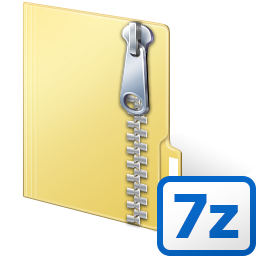
<style>
.page{position:relative;width:256px;height:256px;background:#ffffff}
.page>*{position:absolute;margin:0}
.t1{font:60px "Tahoma-Bold";letter-spacing:0.02em;color:#0064c8}
.t2{font:60px "Tahoma-Bold";color:#0064c8}
</style>
<div class="page">
<p class="t1" style="left:174px;top:194px;width:65px;height:44px">7<span class="t2">z</span></p>
</div>
